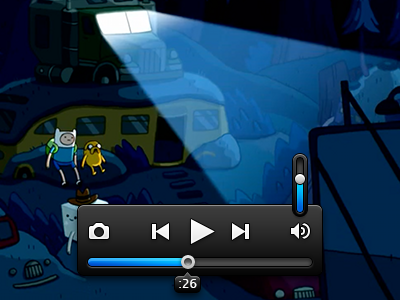
<style>
.page{position:relative;width:400px;height:300px}
.page>*{position:absolute;margin:0}
.t1{font:12px "LucidaGrande";color:#ffffff}
</style>
<div class="page">
<p class="t1" style="left:179px;top:279px;width:18px;height:9px">:26</p>
</div>
